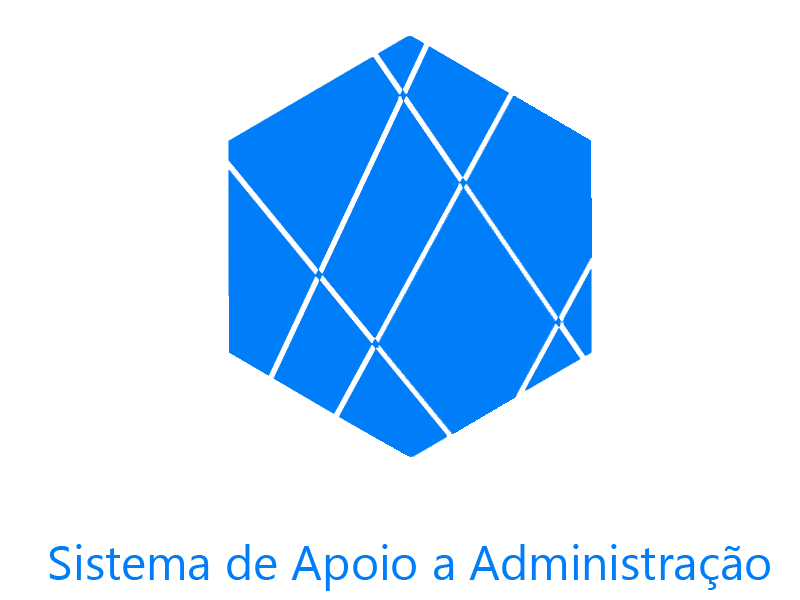
<style>
.page{position:relative;width:800px;height:600px;background:#ffffff}
.page>*{position:absolute;margin:0}
.t1{font:48px "NirmalaUI";color:#007ef9}
</style>
<div class="page">
<p class="t1" style="left:49px;top:544px;width:721px;height:47px">Sistema de Apoio a Administração</p>
</div>
